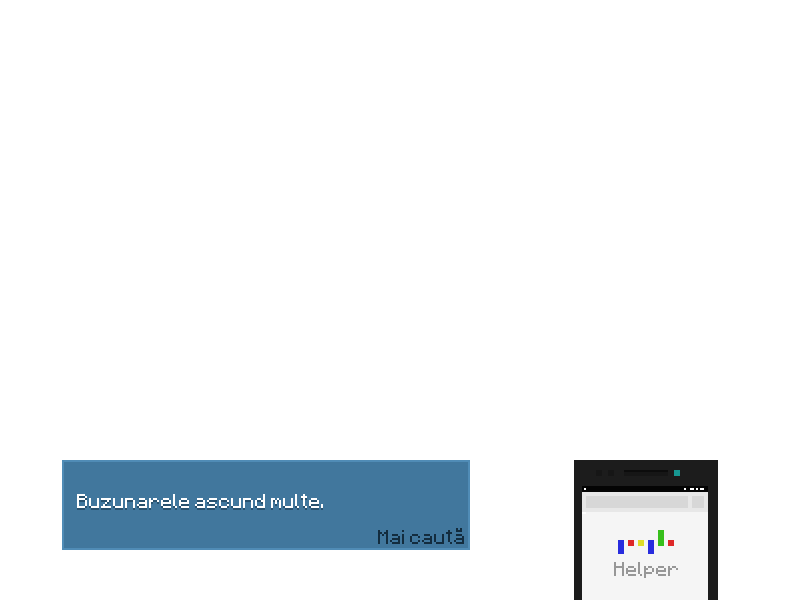
<style>
.page{position:relative;width:800px;height:600px;background:#ffffff}
.page>*{position:absolute;margin:0}
.t1{font:16px "Minecraftia-Regular";color:#ffffff}
.t2{font:16px "Minecraftia-Regular";color:#132c3e}
.t3{font:16px "Minecraftia-Regular";color:#979797}
</style>
<div class="page">
<p class="t1" style="left:77px;top:494px;width:246px;height:14px">Buzunarele ascund multe.</p>
<p class="t2" style="left:378px;top:528px;width:86px;height:16px">Mai caută</p>
<p class="t3" style="left:614px;top:562px;width:64px;height:16px">Helper</p>
</div>
